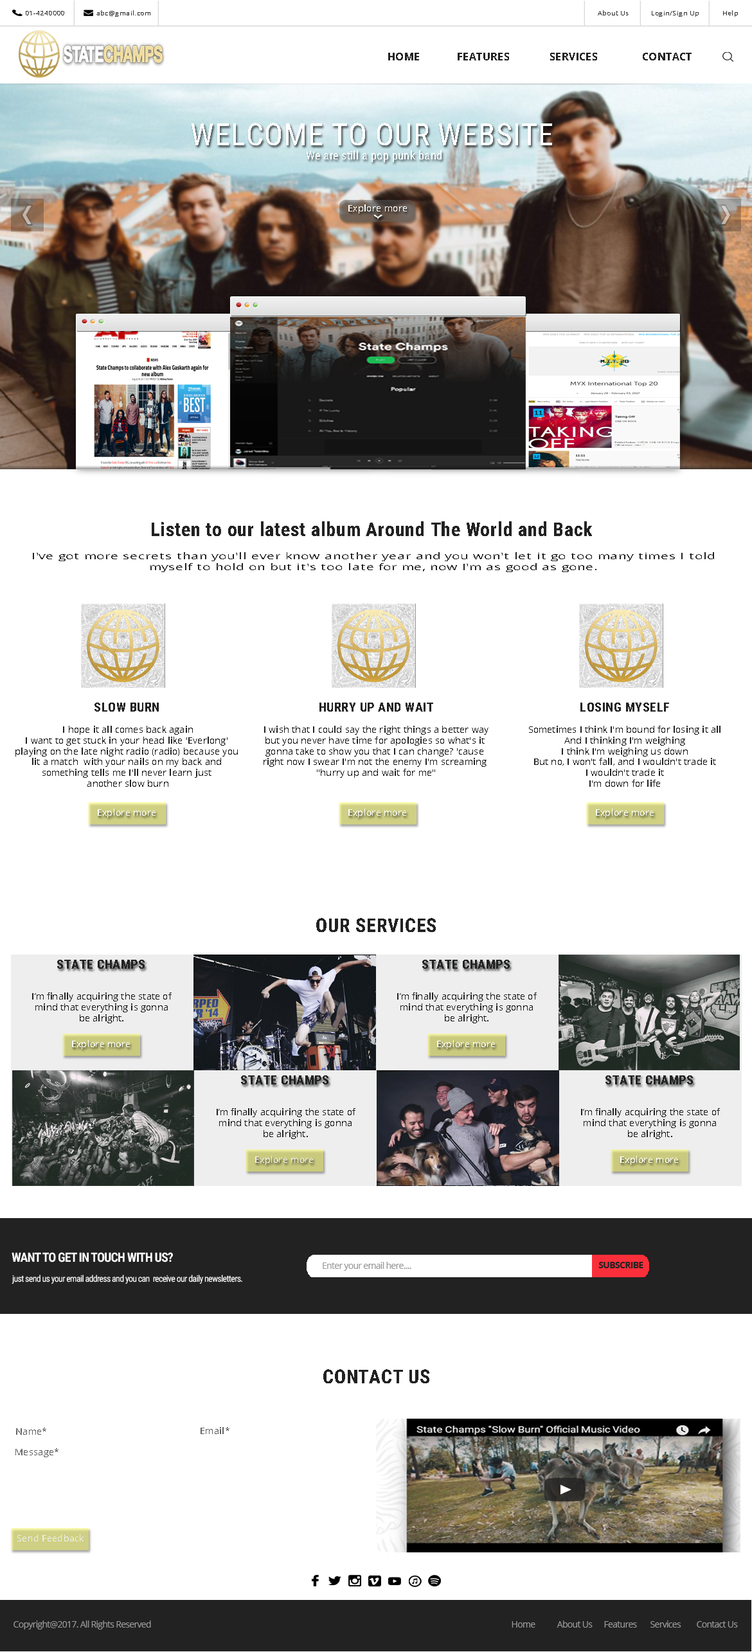
<style>
.page{position:relative;width:752px;height:1652px;background:#ffffff}
.page>*{position:absolute;margin:0}
.t1{font:6.5px "OpenSans";letter-spacing:0.025em;color:#323232;scale:1.07 1}
.t2{font:10.3px "OpenSans-Bold";letter-spacing:0.025em;color:#222222;text-transform:uppercase}
.t3{font:9px "OpenSans";letter-spacing:0.025em;color:#ffffff}
.t4{font:19.3px "RobotoCondensed-Bold";letter-spacing:0.025em;color:#222222}
.t5{font:9px "OpenSans";letter-spacing:0.025em;color:#222222;scale:1.52 1}
.t6{font:12.9px "RobotoCondensed-Bold";letter-spacing:0.025em;color:#222222;text-transform:uppercase}
.t7{font:9px "OpenSans";letter-spacing:0.014em;color:#222222}
.t8{font:19.3px "RobotoCondensed-Bold";letter-spacing:0.025em;color:#222222;text-transform:uppercase}
.t9{font:9px "OpenSans";letter-spacing:0.025em;color:#eeeeee}
.t10{font:12.9px "RobotoCondensed-Bold";letter-spacing:-0.05em;color:#ffffff;text-transform:uppercase}
.t11{font:9px "OpenSans";letter-spacing:-0.05em;color:#999999}
.t12{font:9px "OpenSans-Bold";letter-spacing:-0.05em;color:#222222;text-transform:uppercase}
.t13{font:9px "RobotoCondensed-Regular";letter-spacing:-0.05em;color:#ffffff}
.t14{font:9px "OpenSans";letter-spacing:0.025em;color:#626262}
</style>
<div class="page">
<p class="t1" style="left:26px;top:10px;width:124px;height:7px">01-4240000  abc@gmail.com</p>
<p class="t1" style="left:598px;top:10px;width:140px;height:7px">About Us  Login/Sign Up  Help</p>
<p class="t2" style="left:388px;top:53px;width:304px;height:7px">Home  Features  Services  Contact</p>
<p class="t3" style="left:348px;top:204px;width:59px;height:9px">Explore more</p>
<p class="t4" style="left:152px;top:521px;width:440px;height:15px">Listen to our latest album Around The World and Back</p>
<p class="t5" style="left:33px;top:552px;width:681px;height:20px;text-align:center">I've got more secrets than you'll ever know another year and you won't let it go too many times I told <br>myself to hold on but it's too late for me, now I'm as good as gone.</p>
<p class="t6" style="left:94px;top:703px;width:65px;height:9px">Slow Burn</p>
<p class="t6" style="left:320px;top:703px;width:113px;height:9px">hurry up and wait</p>
<p class="t6" style="left:580px;top:703px;width:89px;height:9px">losing myself</p>
<p class="t7" style="left:15px;top:726px;width:223px;height:61px;text-align:center">I hope it all comes back again<br>I want to get stuck in your head like 'Everlong' <br>playing on the late night radio (radio) because you <br>lit a match  with your nails on my back and <br>something tells me I'll never learn just <br>another slow burn</p>
<p class="t7" style="left:264px;top:726px;width:225px;height:52px;text-align:center">I wish that I could say the right things a better way<br>but you never have time for apologies so what's it <br>gonna take to show you that I can change? 'cause <br>right now I swear I'm not the enemy I'm screaming <br>"hurry up and wait for me"</p>
<p class="t7" style="left:529px;top:726px;width:192px;height:61px;text-align:center">Sometimes I think I'm bound for losing it all<br>And I thinking I'm weighing<br>I think I'm weighing us down<br>But no, I won't fall, and I wouldn't trade it<br>I wouldn't trade it<br>I'm down for life</p>
<p class="t3" style="left:98px;top:809px;width:58px;height:9px">Explore more</p>
<p class="t3" style="left:348px;top:809px;width:58px;height:9px">Explore more</p>
<p class="t3" style="left:596px;top:809px;width:58px;height:9px">Explore more</p>
<p class="t8" style="left:316px;top:918px;width:120px;height:14px">Our Services</p>
<p class="t6" style="left:57px;top:960px;width:88px;height:9px">State champs</p>
<p class="t6" style="left:422px;top:960px;width:88px;height:9px">State champs</p>
<p class="t7" style="left:32px;top:993px;width:140px;height:30px;text-align:center">I’m finally acquiring the state of<br>mind that everything is gonna<br>be alright.</p>
<p class="t7" style="left:397px;top:993px;width:140px;height:30px;text-align:center">I’m finally acquiring the state of<br>mind that everything is gonna<br>be alright.</p>
<p class="t3" style="left:72px;top:1040px;width:58px;height:9px">Explore more</p>
<p class="t3" style="left:437px;top:1040px;width:58px;height:9px">Explore more</p>
<p class="t6" style="left:241px;top:1076px;width:87px;height:8px">State champs</p>
<p class="t6" style="left:606px;top:1076px;width:87px;height:8px">State champs</p>
<p class="t7" style="left:217px;top:1108px;width:139px;height:31px;text-align:center">I’m finally acquiring the state of<br>mind that everything is gonna<br>be alright.</p>
<p class="t7" style="left:581px;top:1108px;width:139px;height:31px;text-align:center">I’m finally acquiring the state of<br>mind that everything is gonna<br>be alright.</p>
<p class="t9" style="left:255px;top:1156px;width:58px;height:9px">Explore more</p>
<p class="t3" style="left:620px;top:1156px;width:58px;height:9px">Explore more</p>
<p class="t10" style="left:12px;top:1252px;width:161px;height:11px">want to get in touch with us?</p>
<p class="t11" style="left:323px;top:1262px;width:88px;height:9px">Enter your email here....</p>
<p class="t12" style="left:598px;top:1262px;width:46px;height:6px">subscribe</p>
<p class="t13" style="left:12px;top:1275px;width:230px;height:9px">just send us your email address and you can  receive our daily newsletters.</p>
<p class="t8" style="left:323px;top:1369px;width:106px;height:14px">contact us</p>
<p class="t14" style="left:16px;top:1428px;width:30px;height:7px">Name*</p>
<p class="t14" style="left:201px;top:1427px;width:29px;height:7px">Email*</p>
<p class="t14" style="left:15px;top:1448px;width:44px;height:9px">Message*</p>
<p class="t9" style="left:17px;top:1534px;width:67px;height:8px">Send Feedback</p>
<p class="t11" style="left:14px;top:1621px;width:137px;height:9px">Copyright@2017. All Rights Reserved</p>
<p class="t11" style="left:512px;top:1621px;width:226px;height:7px">Home About Us Features Services Contact Us</p>
</div>
